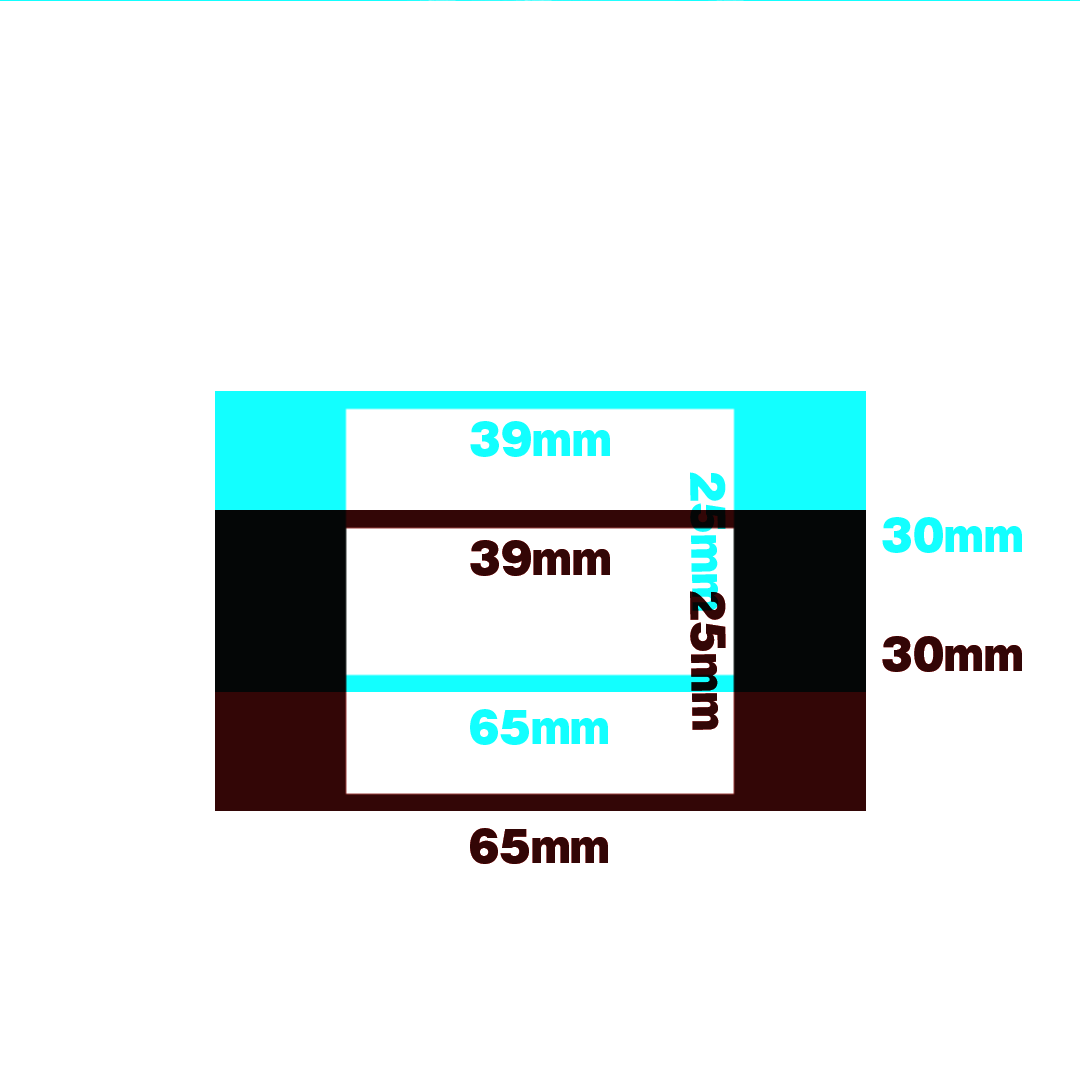
<style>
.page{position:relative;width:1080px;height:1080px;background:#ffffff}
.page>*{position:absolute;margin:0}
.t1{font:41.7px "GothicMB101Pr5-Ultra";color:#12ffff}
.t2{font:41.7px "GothicMB101Pr5-Ultra"}
</style>
<div class="page">
<p class="t1" style="left:470px;top:420px;width:140px;height:36px">39mm</p>
<p class="t2" style="left:690px;top:471px;width:36px;height:139px;rotate:89deg">25mm</p>
<p class="t1" style="left:882px;top:516px;width:140px;height:36px">30mm</p>
<p class="t1" style="left:470px;top:708px;width:138px;height:36px">65mm</p>
</div>
